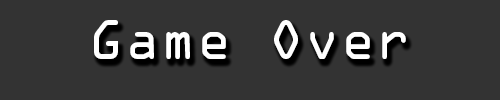
<style>
.page{position:relative;width:500px;height:100px;background:#333333}
.page>*{position:absolute;margin:0}
.t1{font:50px "OCRAStd";color:#ffffff}
</style>
<div class="page">
<p class="t1" style="left:94px;top:20px;width:312px;height:39px">Game Over</p>
</div>
